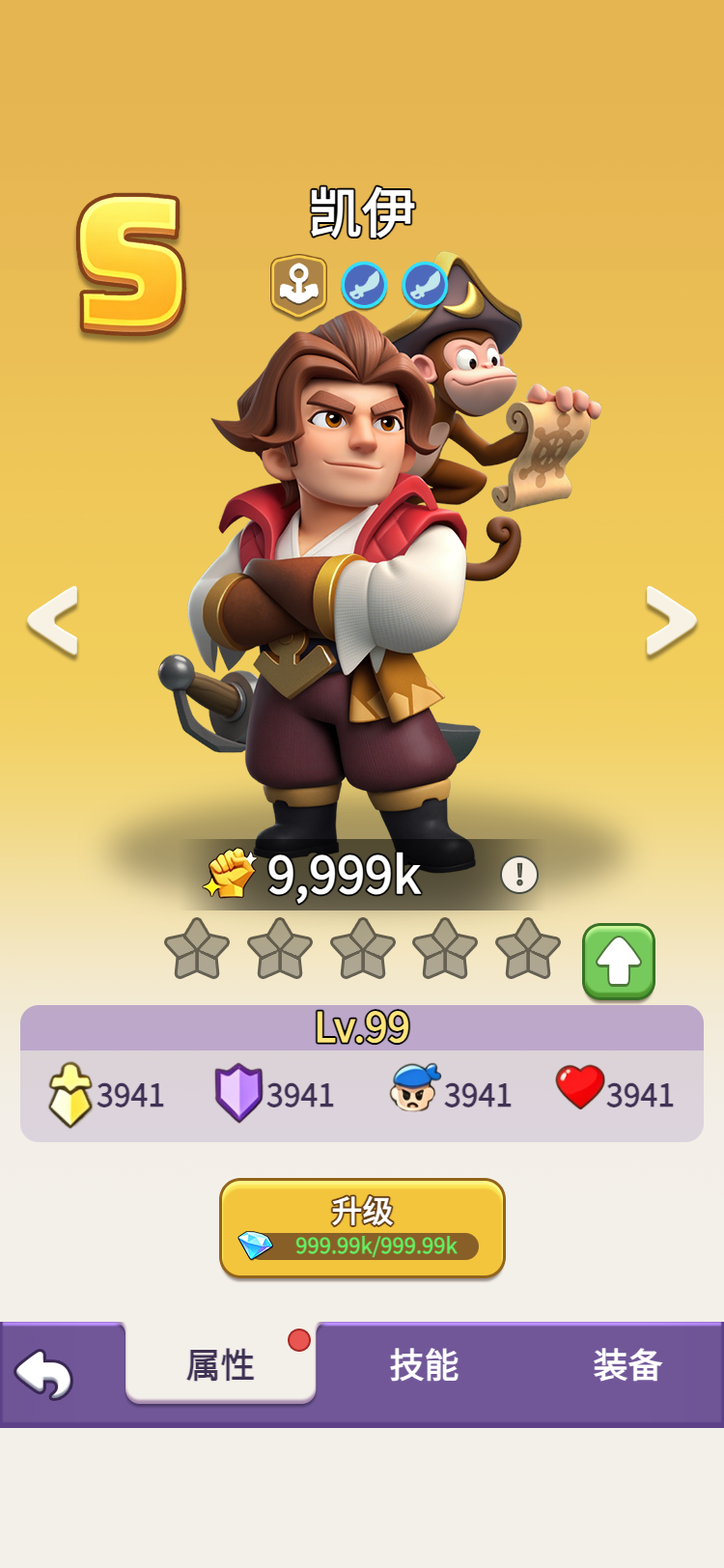
<style>
.page{position:relative;width:724px;height:1568px}
.page>*{position:absolute;margin:0}
.t1{font:54.1px "WebPSD-18463539-0-Regular";color:#ffffff;font-weight:bold}
.t2{font:50.2px "WebPSD-18463539-0-Regular";color:#ffffff;font-weight:bold}
.t3{font:40.6px "WebPSD-18463539-0-Regular";color:#ffe57b;font-weight:bold}
.t4{font:30.9px "WebPSD-18463539-0-Regular";color:#3f3254;font-weight:bold}
.t5{font:30.9px "WebPSD-18463539-0-Regular";color:#ffffff;font-weight:bold}
.t6{font:21.2px "WebPSD-18463539-0-Regular";color:#65ee62;font-weight:bold}
.t7{font:34.8px/34.8px "WebPSD-18463539-0-Regular";color:#3f3254;font-weight:bold}
.t8{font:34.8px/34.8px "WebPSD-18463539-0-Regular";color:#ffffff;font-weight:bold}
</style>
<div class="page">
<p class="t1" style="left:241px;top:179px;width:242px;height:67px">凯伊</p>
<p class="t2" style="left:266px;top:843px;width:241px;height:64px">9,999k</p>
<p class="t3" style="left:20px;top:1001px;width:684px;height:50px">Lv.99</p>
<p class="t4" style="left:97px;top:1072px;width:106px;height:46px">3941</p>
<p class="t4" style="left:266px;top:1072px;width:107px;height:46px">3941</p>
<p class="t4" style="left:444px;top:1072px;width:106px;height:46px">3941</p>
<p class="t4" style="left:606px;top:1072px;width:87px;height:46px">3941</p>
<p class="t5" style="left:219px;top:1190px;width:287px;height:42px">升级</p>
<p class="t6" style="left:275px;top:1230px;width:203px;height:31px">999.99k/999.99k</p>
<p class="t7" style="left:112px;top:1322px;width:217px;height:87px;text-align:center">属性</p>
<p class="t8" style="left:316px;top:1322px;width:217px;height:87px;text-align:center">技能</p>
</div>
